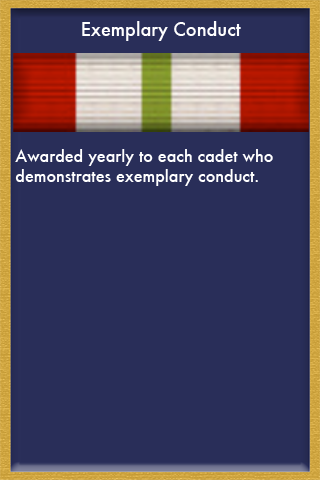
<style>
.page{position:relative;width:320px;height:480px;background:#292e59}
.page>*{position:absolute;margin:0}
.t1{font:18px "Futura-Medium";color:#ffffff}
.t2{font:16px "Futura-Medium";color:#ffffff}
</style>
<div class="page">
<p class="t1" style="left:82px;top:21px;width:159px;height:20px">Exemplary Conduct</p>
<p class="t2" style="left:15px;top:149px;width:258px;height:37px">Awarded yearly to each cadet who <br>demonstrates exemplary conduct.</p>
</div>
